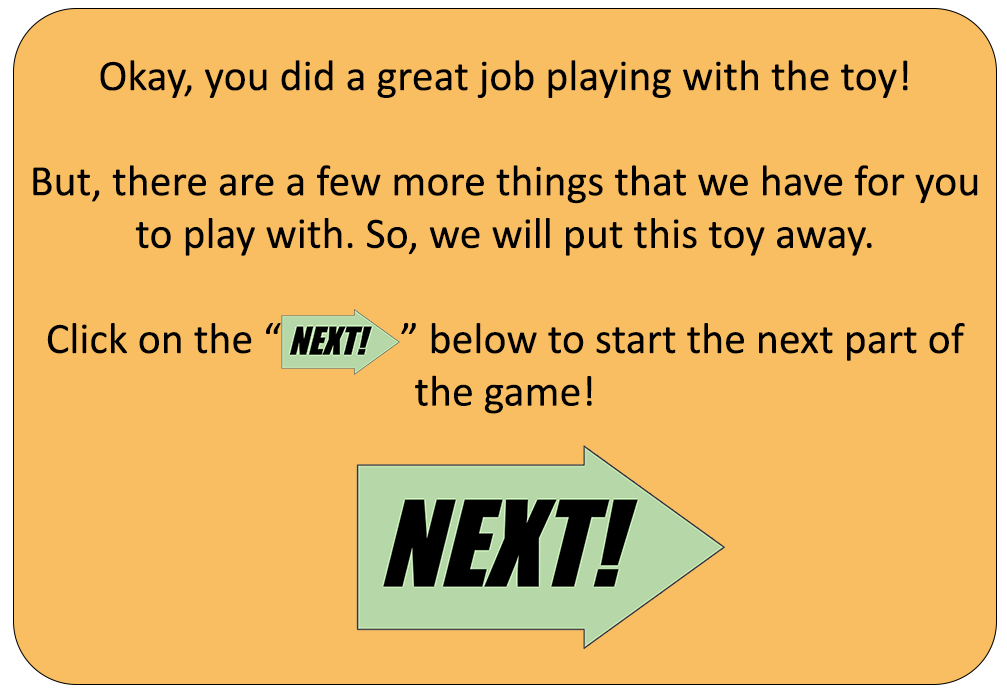
<style>
.page{position:relative;width:1007px;height:693px;background:#f8be61}
.page>*{position:absolute;margin:0}
.t1{font:43.8px "Calibri";color:#000000}
</style>
<div class="page">
<p class="t1" style="left:33px;top:60px;width:945px;height:354px;text-align:center">Okay, you did a great job playing with the toy! <br><br>But, there are a few more things that we have for you to play with. So, we will put this toy away.<br><br>Click on the “            ” below to start the next part of the game!</p>
</div>
